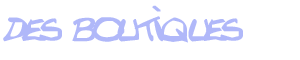
<style>
.page{position:relative;width:300px;height:60px;background:#ffffff}
.page>*{position:absolute;margin:0}
.t1{font:60px "Texted'critureLanfeust";color:#b0b8f9}
</style>
<div class="page">
<p class="t1" style="left:3px;top:5px;width:240px;height:38px">des boutiques</p>
</div>
